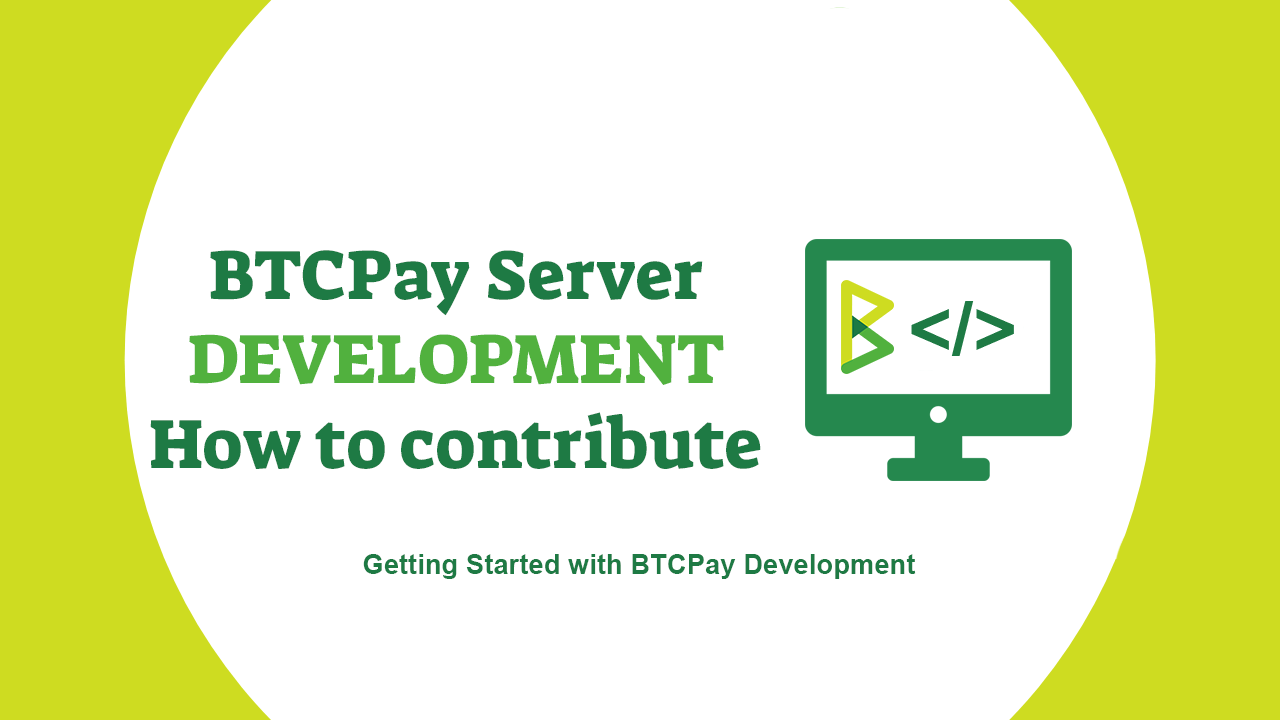
<style>
.page{position:relative;width:1280px;height:720px;background:#ffffff}
.page>*{position:absolute;margin:0}
.t1{font:70.8px "SuezOne-Regular";color:#1e7a44}
.t2{font:70.8px "SuezOne-Regular";color:#51b13e}
.t3{font:27.4px "Arial-BoldMT";color:#1e7a44}
</style>
<div class="page">
<p class="t1" style="left:150px;top:250px;width:611px;height:219px;text-align:center">BTCPay Server<br><span class="t2">DEVELOPMENT<br></span>How to contribute</p>
<p class="t3" style="left:363px;top:554px;width:553px;height:25px">Getting Started with BTCPay Development</p>
</div>
